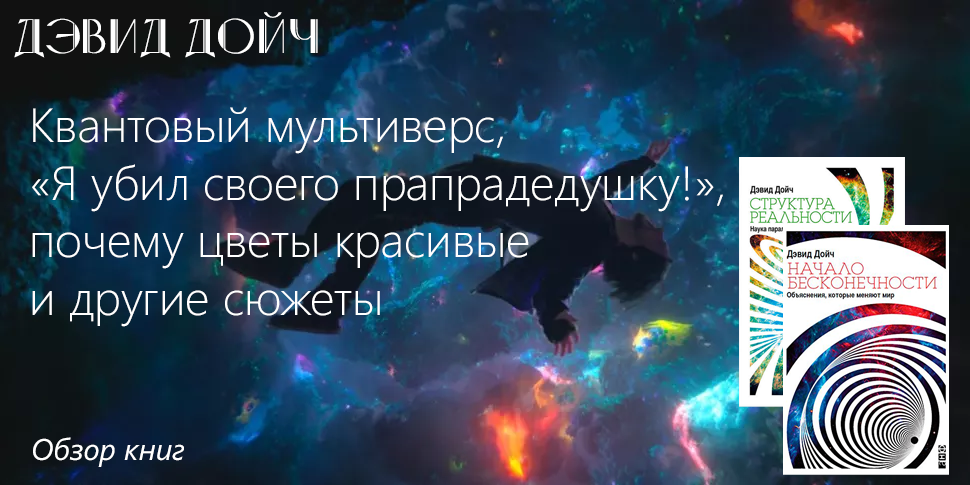
<style>
.page{position:relative;width:970px;height:485px}
.page>*{position:absolute;margin:0}
.t1{font:50px "5thAvenue";color:#ffffff}
.t2{font:48px "SegoeUI-Light";color:#ffffff}
.t3{font:30px "SegoeUI-Italic";color:#ffffff}
</style>
<div class="page">
<p class="t1" style="left:14px;top:12px;width:304px;height:46px">Дэвид Дойч</p>
<p class="t2" style="left:32px;top:107px;width:691px;height:220px;text-align:right">Квантовый мультиверс,<br>«Я убил своего прапрадедушку!»,<br>почему цветы красивые<br>и другие сюжеты</p>
<p class="t3" style="left:33px;top:437px;width:151px;height:30px">Обзор книг</p>
</div>
